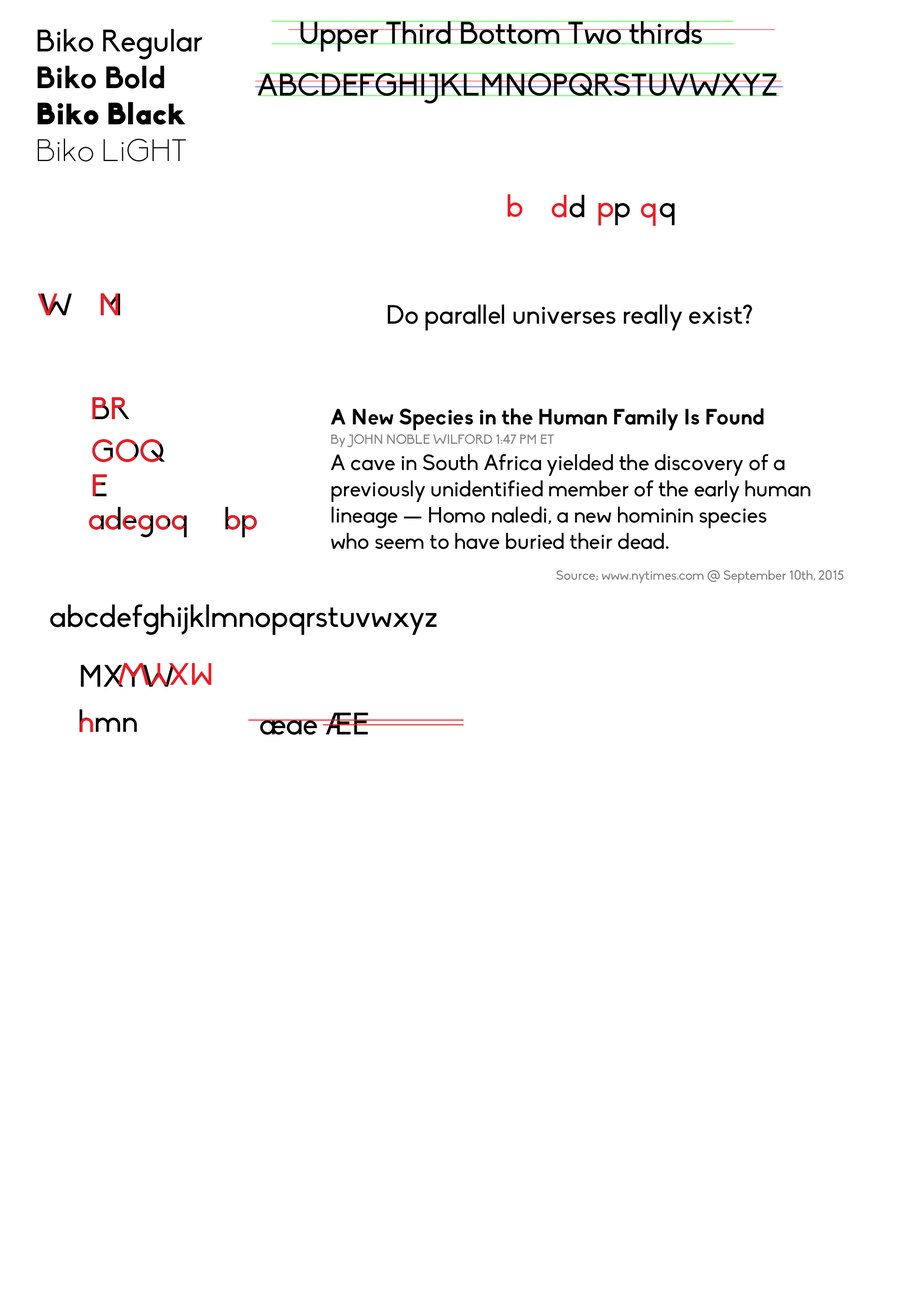
<style>
.page{position:relative;width:917px;height:1301px;background:#ffffff}
.page>*{position:absolute;margin:0}
.t1{font:30.5px "Biko";color:#000000}
.t2{font:30.5px "Biko-Bold";color:#000000}
.t3{font:30.5px "Biko-Black";color:#000000}
.t4{font:30.5px "Biko-Light";color:#000000}
.t5{font:30.5px "Biko";color:#ed1b23}
.t6{font:30.5px "Biko";color:#ed1c24}
.t7{font:30.5px "Biko"}
.t8{font:26.1px "Biko";color:#000000}
.t9{font:21.8px "Biko";color:#000000}
.t10{font:21.8px "Biko-Bold";color:#000000}
.t11{font:13.1px/19.6px "Biko";color:#808080}
.t12{font:13.1px "Biko";color:#808080}
</style>
<div class="page">
<p class="t1" style="left:37px;top:29px;width:165px;height:133px">Biko Regular<br><span class="t2">Biko Bold<br></span><span class="t3">Biko Black<br></span><span class="t4">Biko LiGHT</span></p>
<p class="t1" style="left:301px;top:21px;width:401px;height:31px">Upper Third Bottom Two thirds</p>
<p class="t1" style="left:258px;top:73px;width:518px;height:31px">ABCDEFGHIJKLMNOPQRSTUVWXYZ</p>
<p class="t5" style="left:507px;top:194px;width:15px;height:23px">b</p>
<p class="t5" style="left:551px;top:195px;width:15px;height:23px;rotate:180deg">b</p>
<p class="t1" style="left:569px;top:195px;width:105px;height:31px">d    p    q</p>
<p class="t5" style="left:598px;top:202px;width:15px;height:24px">b</p>
<p class="t5" style="left:640px;top:203px;width:16px;height:23px;rotate:180deg">b</p>
<p class="t6" style="left:38px;top:293px;width:20px;height:22px">V</p>
<p class="t1" style="left:41px;top:293px;width:31px;height:22px">W</p>
<p class="t7" style="left:101px;top:293px;width:19px;height:22px">M</p>
<p class="t6" style="left:101px;top:293px;width:18px;height:22px">N</p>
<p class="t8" style="left:388px;top:304px;width:364px;height:26px">Do parallel universes really exist?</p>
<p class="t7" style="left:92px;top:397px;width:38px;height:22px">BR</p>
<p class="t5" style="left:92px;top:397px;width:13px;height:22px">P</p>
<p class="t5" style="left:112px;top:397px;width:13px;height:22px">P</p>
<p class="t9" style="left:330px;top:408px;width:513px;height:175px"><span class="t10">A New Species in the Human Family Is Found<br></span><span class="t11">By JOHN NOBLE WILFORD 1:47 PM ET<br></span>A cave in South Africa yielded the discovery of a <br>previously unidentified member of the early human<br>lineage — Homo naledi, a new hominin species<br>who seem to have buried their dead.<br><br>                                                                           <span class="t12">Source; www.nytimes.com @ September 10th, 2015</span></p>
<p class="t6" style="left:92px;top:439px;width:73px;height:23px">GOQ</p>
<p class="t6" style="left:92px;top:439px;width:21px;height:23px">C</p>
<p class="t6" style="left:116px;top:439px;width:20px;height:23px">C</p>
<p class="t6" style="left:141px;top:439px;width:20px;height:23px">C</p>
<p class="t5" style="left:92px;top:474px;width:14px;height:22px">F</p>
<p class="t7" style="left:93px;top:474px;width:14px;height:22px">E</p>
<p class="t7" style="left:89px;top:507px;width:168px;height:31px">adegoq     bp</p>
<p class="t6" style="left:89px;top:515px;width:13px;height:15px">c</p>
<p class="t6" style="left:105px;top:515px;width:14px;height:15px">c</p>
<p class="t6" style="left:122px;top:515px;width:14px;height:15px">c</p>
<p class="t6" style="left:138px;top:515px;width:14px;height:15px">c</p>
<p class="t6" style="left:155px;top:515px;width:14px;height:15px">c</p>
<p class="t6" style="left:172px;top:515px;width:13px;height:15px">c</p>
<p class="t6" style="left:227px;top:515px;width:13px;height:15px;rotate:180deg">c</p>
<p class="t6" style="left:243px;top:515px;width:14px;height:15px;rotate:180deg">c</p>
<p class="t1" style="left:50px;top:604px;width:386px;height:31px">abcdefghijklmnopqrstuvwxyz</p>
<p class="t1" style="left:81px;top:665px;width:93px;height:22px">MXYW</p>
<p class="t6" style="left:118px;top:663px;width:93px;height:22px;rotate:180deg">MXYW</p>
<p class="t1" style="left:79px;top:709px;width:58px;height:23px">hmn</p>
<p class="t1" style="left:260px;top:712px;width:108px;height:23px">æae ÆE</p>
<p class="t6" style="left:80px;top:717px;width:13px;height:15px">u</p>
</div>
